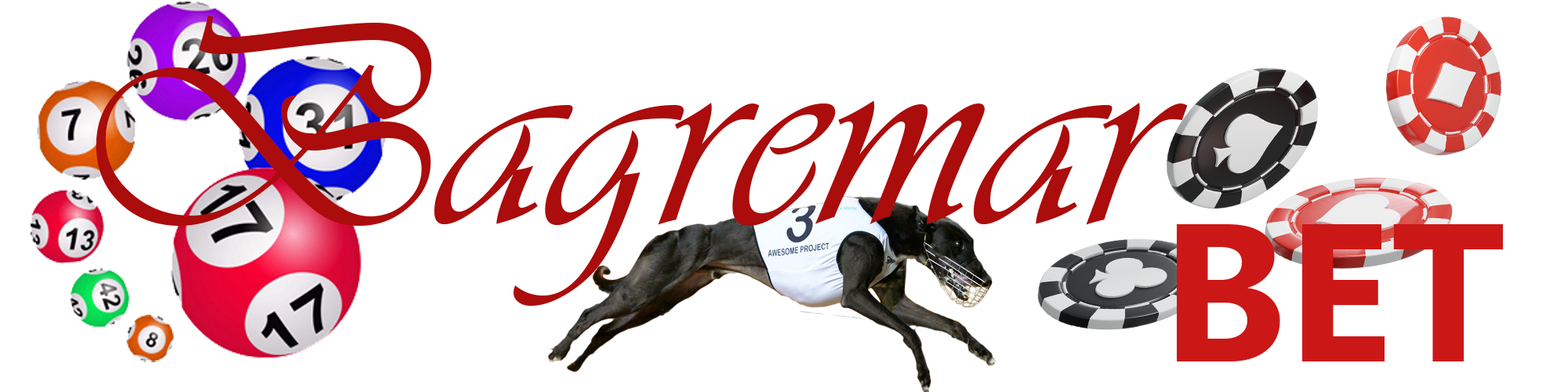
<style>
.page{position:relative;width:1568px;height:392px;background:#ffffff}
.page>*{position:absolute;margin:0}
.t1{font:294px "Vivaldii";color:#ab0c0c}
.t2{font:196px "MyanmarText-Bold";color:#cb1717}
</style>
<div class="page">
<p class="t1" style="left:96px;top:15px;width:1092px;height:291px">Bagremar</p>
<p class="t2" style="left:1177px;top:224px;width:326px;height:137px">BET</p>
</div>
